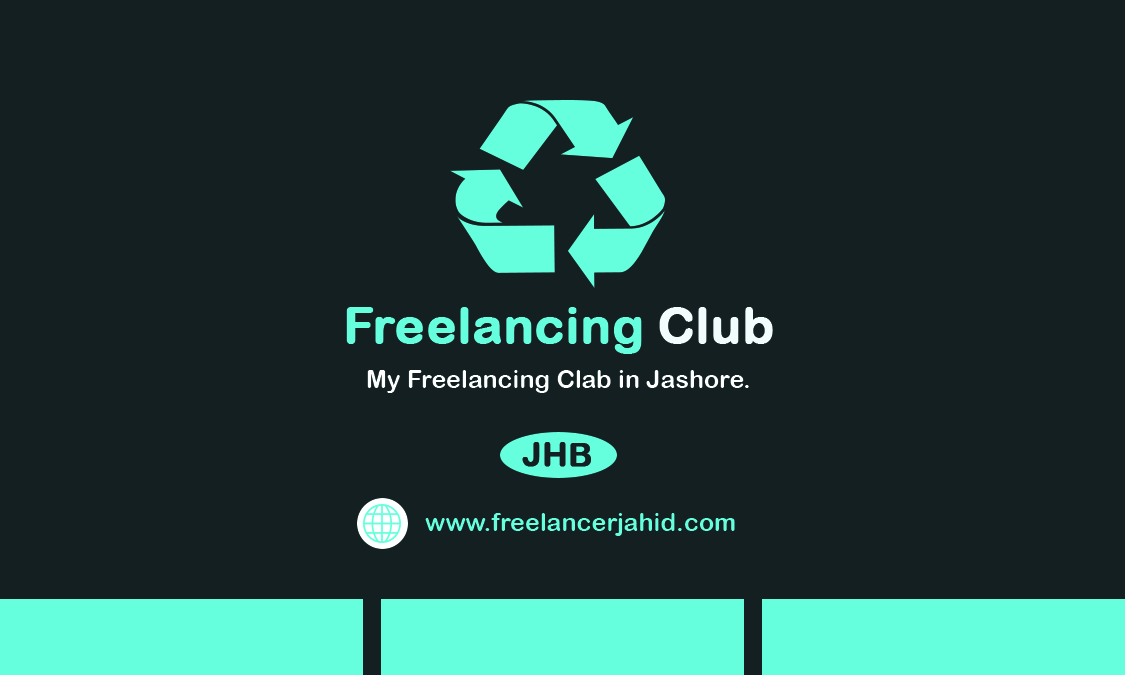
<style>
.page{position:relative;width:1125px;height:675px;background:#131f20}
.page>*{position:absolute;margin:0}
.t1{font:50px "ArialRoundedMTBold";color:#65ffdd;font-weight:bold}
.t2{font:50px "ArialRoundedMTBold";color:#f3fcfc;font-weight:bold}
.t3{font:25px "ArialRoundedMTBold";color:#feffff}
.t4{font:33.3px "ArialRoundedMTBold";color:#131f20;font-weight:bold}
.t5{font:25px "ArialRoundedMTBold";color:#65ffdd}
</style>
<div class="page">
<p class="t1" style="left:346px;top:307px;width:427px;height:47px">Freelancing <span class="t2">Club</span></p>
<p class="t3" style="left:367px;top:370px;width:382px;height:23px">My Freelancing Clab in Jashore.</p>
<p class="t4" style="left:522px;top:442px;width:69px;height:25px">JHB</p>
<p class="t5" style="left:425px;top:513px;width:310px;height:23px">www.freelancerjahid.com</p>
</div>
